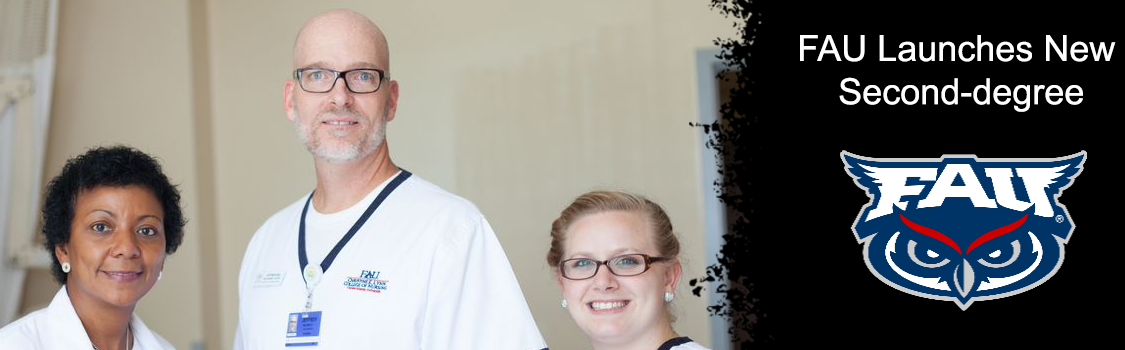
<style>
.page{position:relative;width:1125px;height:350px;background:#000000}
.page>*{position:absolute;margin:0}
.t1{font:36px "ArialMT";color:#ffffff}
</style>
<div class="page">
<p class="t1" style="left:800px;top:35px;width:316px;height:77px;text-align:center">FAU Launches New <br>Second-degree</p>
</div>
